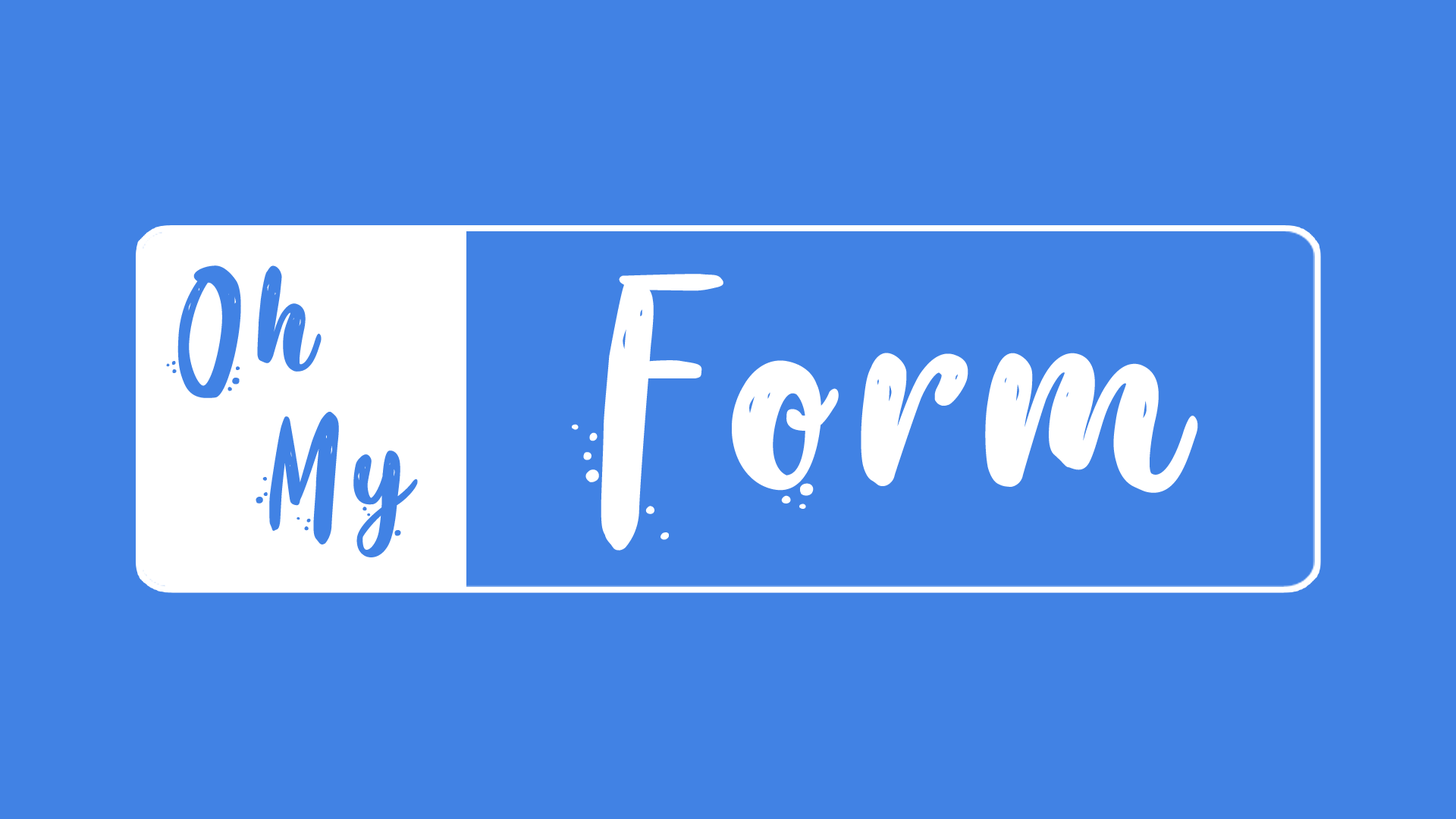
<style>
.page{position:relative;width:1456px;height:819px;background:#4182e4}
.page>*{position:absolute;margin:0}
.t1{font:278.6px "Coaster-Quake---Personal-Use";letter-spacing:0.015em;color:#4182e4;font-weight:bold}
.t2{font:576.6px "Coaster-Quake---Personal-Use";letter-spacing:0.015em;color:#ffffff;font-weight:bold;scale:1.07 1}
</style>
<div class="page">
<p class="t1" style="left:166px;top:265px;width:156px;height:133px">Oh</p>
<p class="t2" style="left:572px;top:274px;width:626px;height:277px">Form</p>
<p class="t1" style="left:256px;top:412px;width:162px;height:145px">My</p>
</div>
